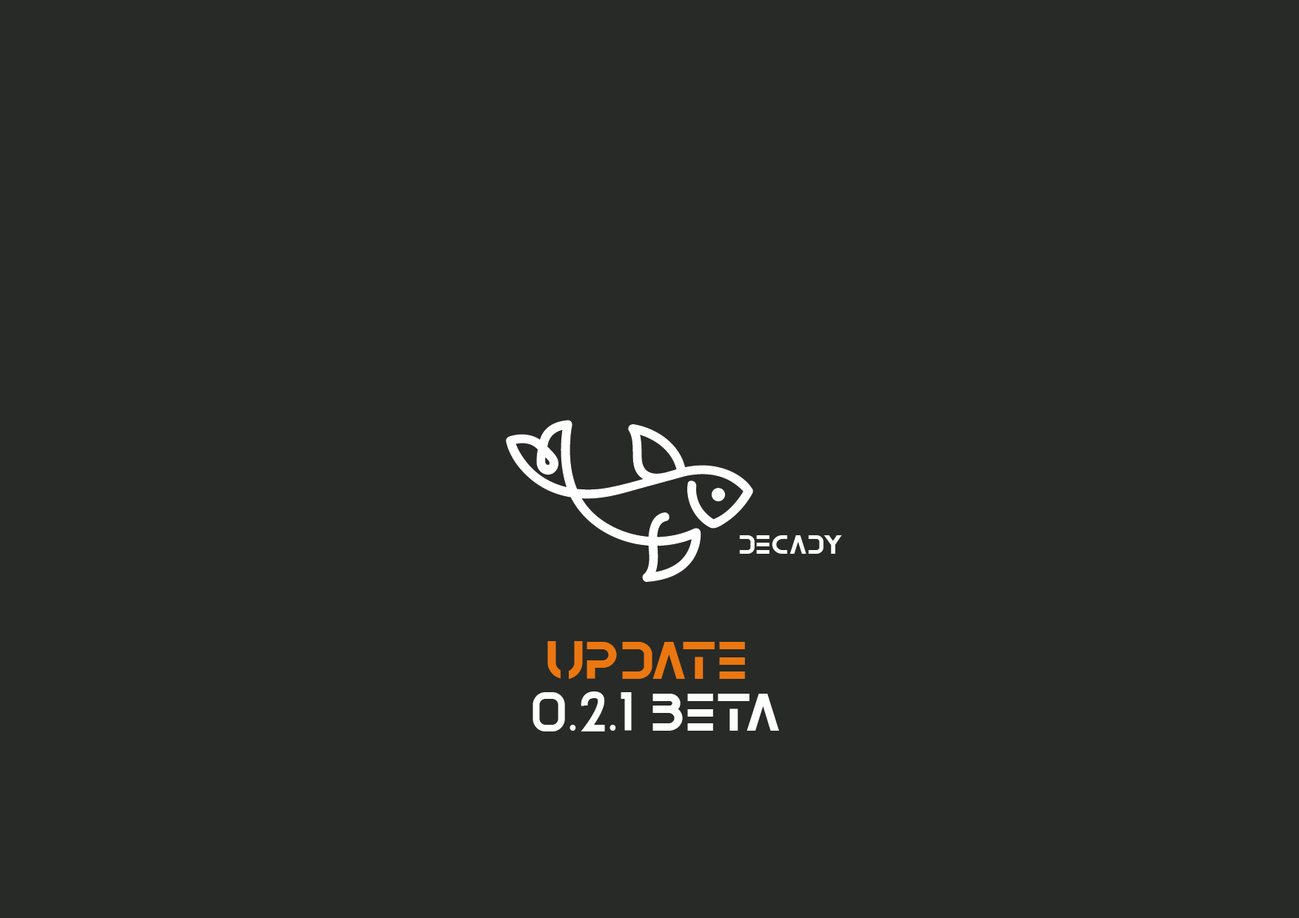
<style>
.page{position:relative;width:1299px;height:918px;background:#282a27}
.page>*{position:absolute;margin:0}
.t1{font:26.7px "Serbie-Regular";color:#fefefe}
.t2{font:53.3px "Serbie-Regular";color:#eb7710}
.t3{font:53.3px "Serbie-Regular";color:#fefefe}
</style>
<div class="page">
<p class="t1" style="left:739px;top:535px;width:103px;height:19px">Decady</p>
<p class="t2" style="left:547px;top:641px;width:198px;height:38px">UPDATE</p>
<p class="t3" style="left:532px;top:692px;width:247px;height:40px">0.2.1 BETA</p>
</div>
